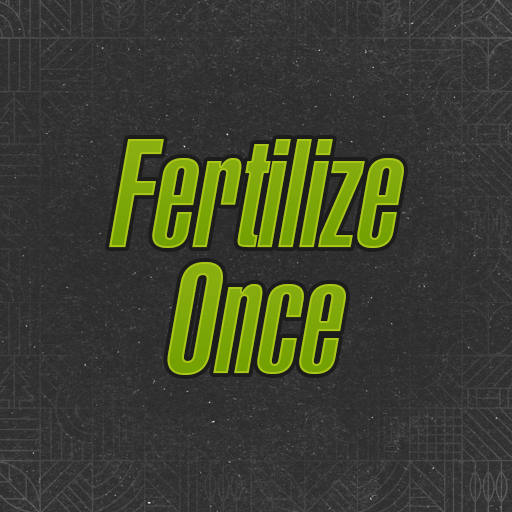
<style>
.page{position:relative;width:512px;height:512px}
.page>*{position:absolute;margin:0}
.t1{font:150px "Swiss911BT-UltraCompressed";color:#83ab0c;font-style:italic}
.t2{font:150px "Swiss911BT-UltraCompressed";color:#82aa0b;font-style:italic}
</style>
<div class="page">
<p class="t1" style="left:109px;top:139px;width:295px;height:109px">Fertilize</p>
<p class="t2" style="left:167px;top:262px;width:179px;height:113px">Once</p>
</div>
